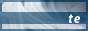
<style>
.page{position:relative;width:88px;height:31px}
.page>*{position:absolute;margin:0}
.t1{font:13px "Myriad-BoldItalic";color:#ffffff}
</style>
<div class="page">
<p class="t1" style="left:68px;top:13px;width:5px;height:15px">t</p>
<p class="t1" style="left:74px;top:13px;width:7px;height:15px">e</p>
</div>
